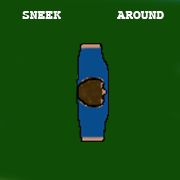
<style>
.page{position:relative;width:180px;height:180px;background:#0f4d06}
.page>*{position:absolute;margin:0}
.t1{font:13px "Courier-Bold";color:#ffffff}
</style>
<div class="page">
<p class="t1" style="left:22px;top:11px;width:142px;height:8px">SNEEK    AROUND</p>
</div>
